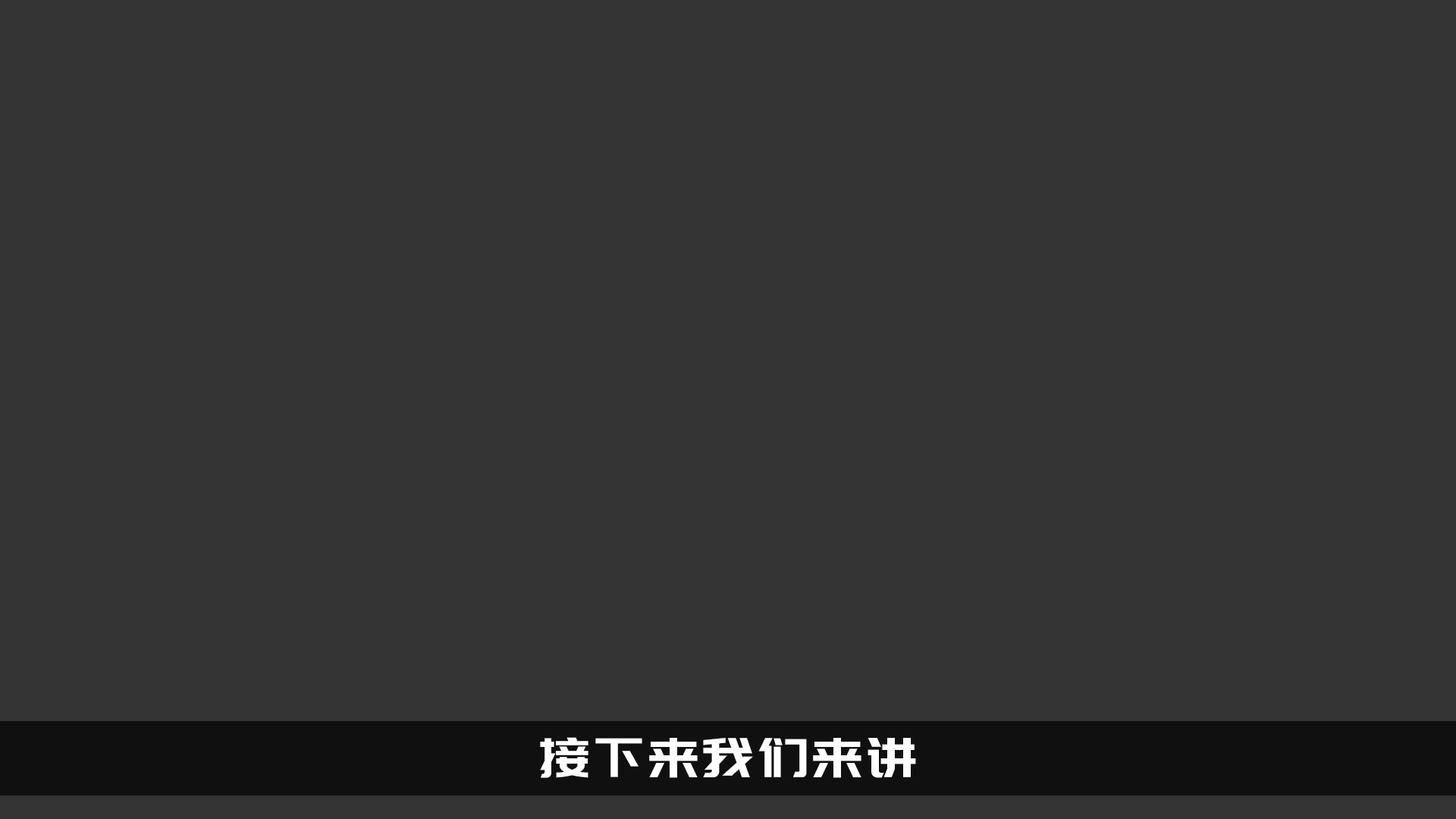
<style>
.page{position:relative;width:1456px;height:819px;background:#333333}
.page>*{position:absolute;margin:0}
.t1{font:54.6px "PangMenZhengDao-3";color:#ffffff}
</style>
<div class="page">
<p class="t1" style="left:540px;top:737px;width:376px;height:41px">接下来我们来讲</p>
</div>
